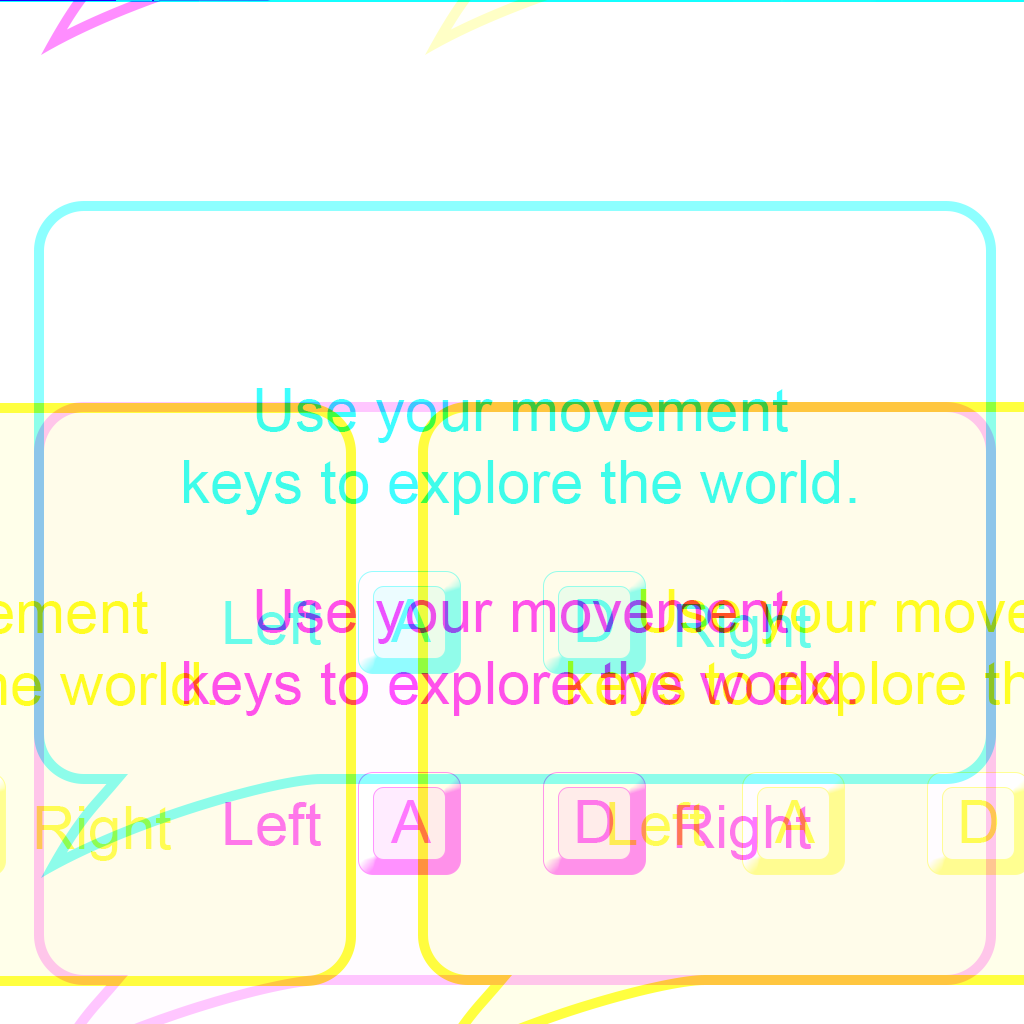
<style>
.page{position:relative;width:1024px;height:1024px;background:#ffffff}
.page>*{position:absolute;margin:0}
.t1{font:60px "ArialMT"}
</style>
<div class="page">
<p class="t1" style="left:184px;top:386px;width:672px;height:127px;text-align:center">Use your movement<br>keys to explore the world.</p>
<p class="t1" style="left:225px;top:599px;width:97px;height:44px">Left</p>
<p class="t1" style="left:390px;top:597px;width:41px;height:43px">A</p>
<p class="t1" style="left:577px;top:597px;width:37px;height:43px">D</p>
<p class="t1" style="left:676px;top:602px;width:136px;height:55px">Right</p>
</div>
